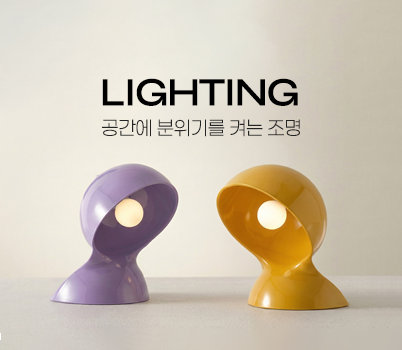
<style>
.page{position:relative;width:402px;height:350px}
.page>*{position:absolute;margin:0}
.t1{font:40.2px "Syne-SemiBold";letter-spacing:-0.04em;color:#000000}
.t2{font:19.4px "Paperlogy-2ExtraLight";color:#242424}
</style>
<div class="page">
<p class="t1" style="left:102px;top:78px;width:196px;height:28px">LIGHTING</p>
<p class="t2" style="left:102px;top:119px;width:198px;height:18px">공간에 분위기를 켜는 조명</p>
</div>
